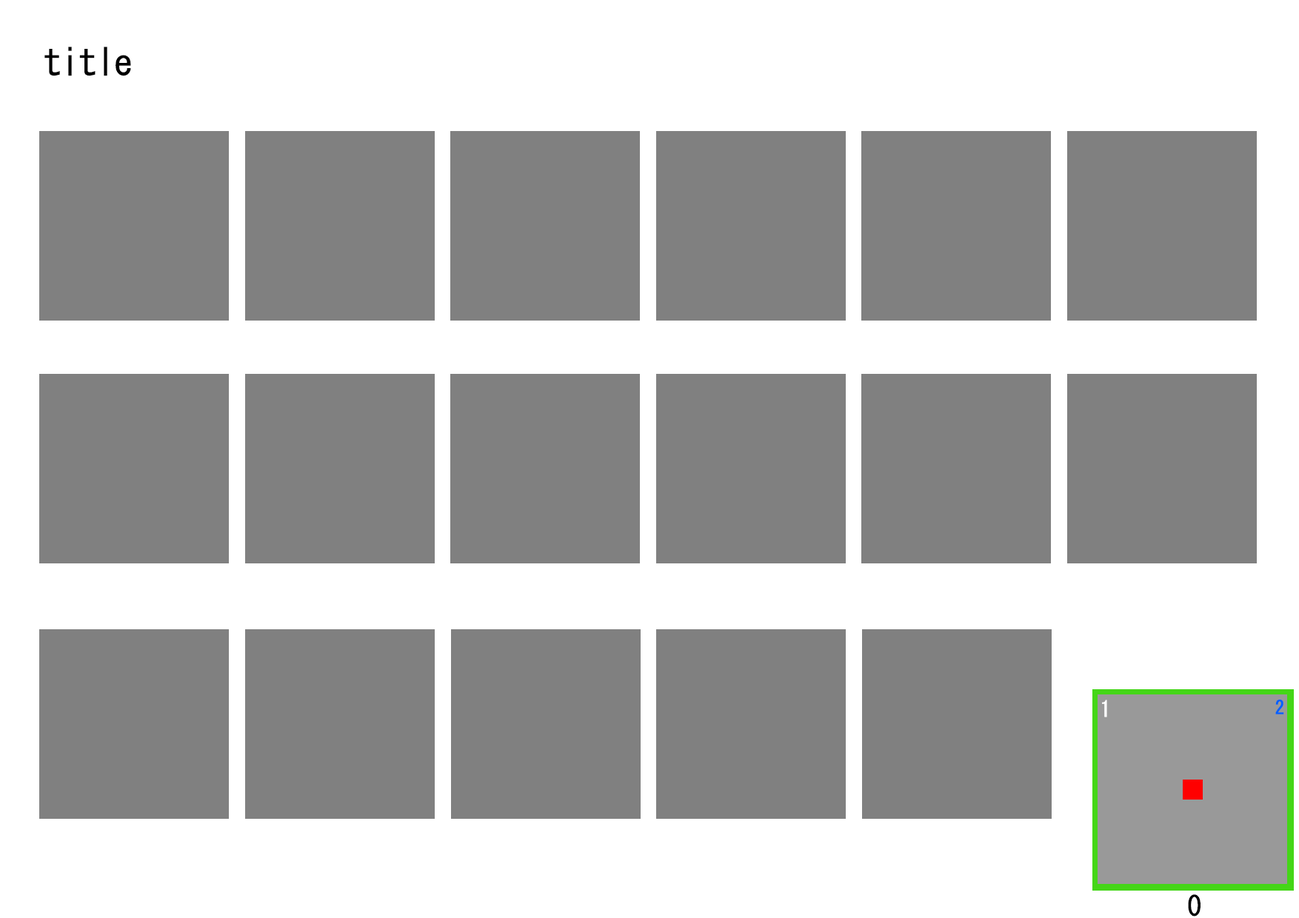
<style>
.page{position:relative;width:1299px;height:918px;background:#808080}
.page>*{position:absolute;margin:0}
.t1{font:37px "MS-Gothic";letter-spacing:-0.05em;color:#000000;font-weight:bold}
.t2{font:21.6px "MS-Gothic";letter-spacing:-0.05em;color:#ffffff;font-weight:bold}
.t3{font:18.5px "MS-Gothic";letter-spacing:-0.05em;color:#0060ff;font-weight:bold}
.t4{font:27.8px "MS-Gothic";letter-spacing:-0.05em;color:#000000;font-weight:bold}
</style>
<div class="page">
<p class="t1" style="left:44px;top:47px;width:87px;height:29px">title</p>
<p class="t2" style="left:1102px;top:700px;width:5px;height:17px">1</p>
<p class="t3" style="left:1275px;top:700px;width:9px;height:15px">2</p>
<p class="t4" style="left:1188px;top:894px;width:12px;height:23px">0</p>
</div>
